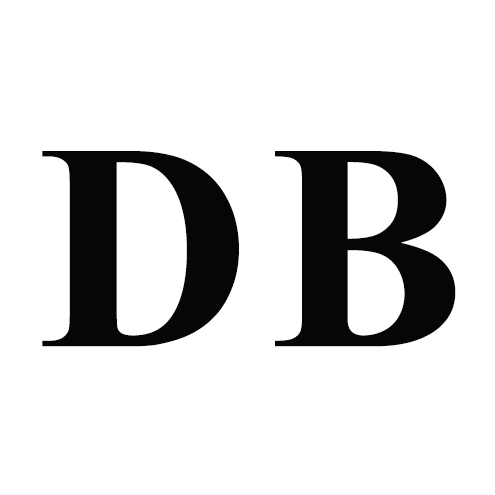
<style>
.page{position:relative;width:495px;height:495px;background:#ffffff}
.page>*{position:absolute;margin:0}
.t1{font:294.8px "TimesNewRomanPS-BoldMT";letter-spacing:0.06em;color:#060606}
</style>
<div class="page">
<p class="t1" style="left:42px;top:151px;width:414px;height:196px">DB</p>
</div>
